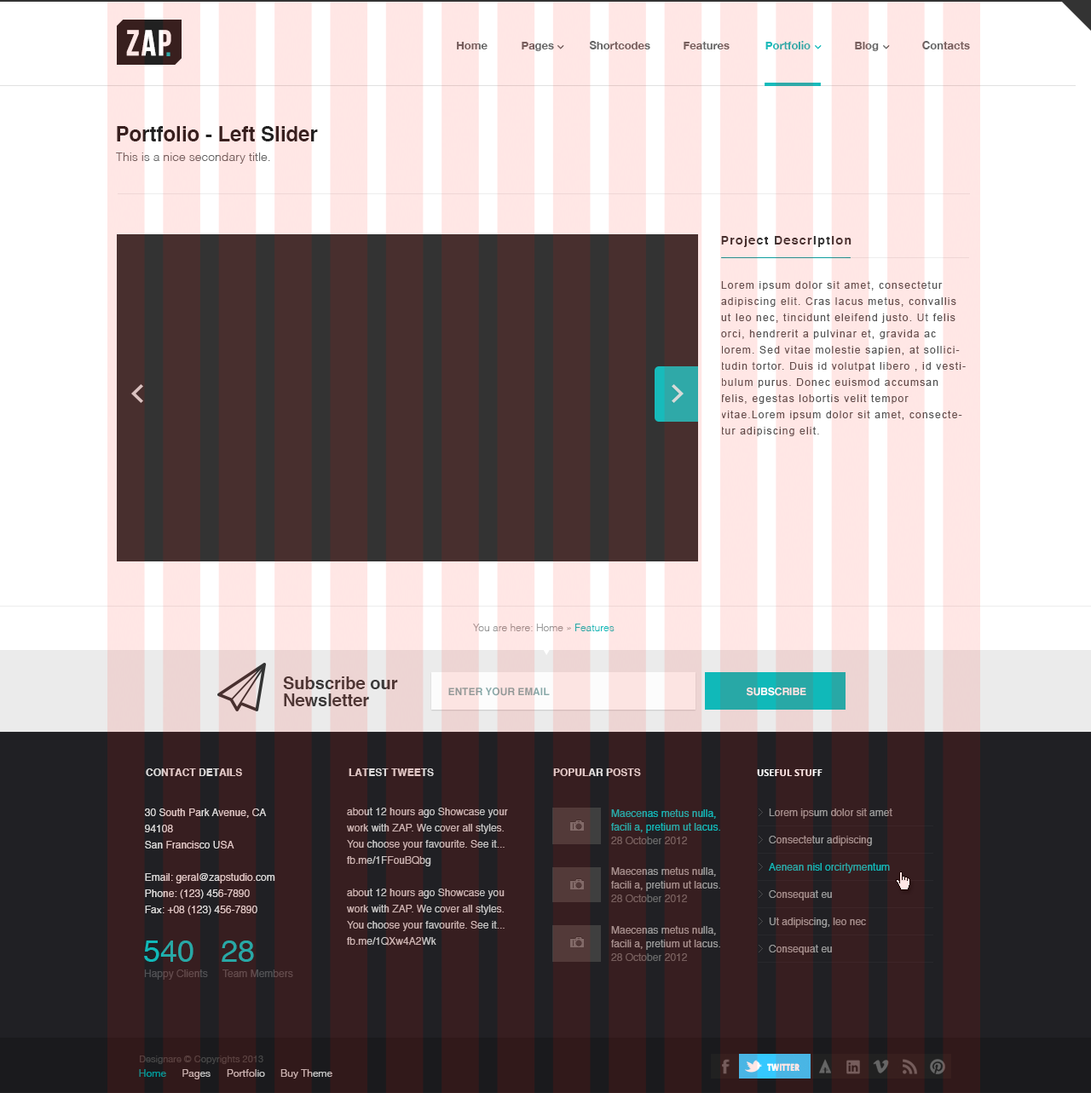
<style>
.page{position:relative;width:1091px;height:1093px}
.page>*{position:absolute;margin:0}
.t1{font:35.8px "BebasNeue";letter-spacing:0.025em;font-weight:bold}
.t2{font:11.1px "HelveticaNeue-Bold";color:#666666}
.t3{font:11.1px "HelveticaNeue-Bold";color:#17bbbb}
.t4{font:35.8px "Helvetica";letter-spacing:0.025em;color:#2fa9a8}
.t5{font:20.5px "Helvetica-Bold";color:#212121}
.t6{font:11.9px "Helvetica-Light";color:#666666}
.t7{font:11.9px "Helvetica-Bold";letter-spacing:0.1em;color:#333333}
.t8{font:10.2px/16.2px "ArialMT";letter-spacing:0.1em;color:#545454}
.t9{font:10.2px "Helvetica-Light";color:#999999}
.t10{font:10.2px "Helvetica-Light";color:#10b9b9}
.t11{font:17px/17px "Helvetica-Bold";color:#3b3a3a}
.t12{font:10.2px "Helvetica-Bold";color:#86a8a8;text-transform:uppercase}
.t13{font:10.2px "Helvetica-Bold";text-transform:uppercase}
.t14{font:10.2px "Helvetica-Bold";color:#dedcdc;text-transform:uppercase}
.t15{font:9.4px "OpenSans-Bold";color:#ffefee;text-transform:uppercase}
.t16{font:10.2px/16.2px "Helvetica";color:#dedcdc}
.t17{font:10.2px/16.2px "Helvetica";color:#c6c5c5}
.t18{font:10.2px/13.6px "Helvetica";color:#10b9b9}
.t19{font:10.2px/13.6px "Helvetica";color:#696969}
.t20{font:10.2px/27.3px "Helvetica";color:#9b9b9b}
.t21{font:10.2px/27.3px "Helvetica";color:#10b9b9}
.t22{font:10.2px/13.6px "Helvetica";color:#9b9b9b}
.t23{font:30.7px "Helvetica";color:#10b9b9}
.t24{font:10.2px "Helvetica";color:#525255}
.t25{font:9.4px "HelveticaNeue";color:#464646}
.t26{font:10.2px "HelveticaNeue";color:#009999}
.t27{font:10.2px "HelveticaNeue";color:#c1c1c1}
</style>
<div class="page">
<p class="t1" style="left:126px;top:30px;width:45px;height:26px">ZAP</p>
<p class="t2" style="left:457px;top:42px;width:30px;height:7px">Home</p>
<p class="t2" style="left:521px;top:42px;width:33px;height:9px">Pages</p>
<p class="t2" style="left:589px;top:41px;width:61px;height:8px">Shortcodes</p>
<p class="t2" style="left:683px;top:42px;width:46px;height:7px">Features</p>
<p class="t3" style="left:765px;top:41px;width:45px;height:8px">Portfolio</p>
<p class="t2" style="left:855px;top:42px;width:24px;height:9px">Blog</p>
<p class="t2" style="left:922px;top:41px;width:48px;height:8px">Contacts</p>
<p class="t4" style="left:166px;top:52px;width:4px;height:4px">.</p>
<p class="t5" style="left:117px;top:126px;width:201px;height:15px">Portfolio - Left Slider</p>
<p class="t6" style="left:116px;top:153px;width:154px;height:11px">This is a nice secondary title.</p>
<p class="t7" style="left:721px;top:236px;width:130px;height:11px">Project Description</p>
<p class="t8" style="left:721px;top:281px;width:244px;height:155px">Lorem ipsum dolor sit amet, consectetur adipiscing elit. Cras lacus metus, convallis ut leo nec, tincidunt eleifend justo. Ut felis orci, hendrerit a pulvinar et, gravida ac lorem. Sed vitae molestie sapien, at sollicitudin tortor. Duis id volutpat libero , id vestibulum purus. Donec euismod accumsan felis, egestas lobortis velit tempor vitae.Lorem ipsum dolor sit amet, consectetur adipiscing elit.</p>
<p class="t9" style="left:473px;top:624px;width:141px;height:7px">You are here: Home » <span class="t10">Features</span></p>
<p class="t11" style="left:283px;top:677px;width:115px;height:29px">Subscribe our <br>Newsletter</p>
<p class="t12" style="left:448px;top:688px;width:102px;height:8px">enter your email</p>
<p class="t13" style="left:746px;top:688px;width:60px;height:8px">SUBSCRIBE</p>
<p class="t14" style="left:146px;top:769px;width:96px;height:7px">CONTACT DETAILS</p>
<p class="t14" style="left:349px;top:769px;width:85px;height:7px">LATEST TWEETS</p>
<p class="t14" style="left:553px;top:769px;width:88px;height:7px">POPULAR POSTS</p>
<p class="t15" style="left:757px;top:769px;width:65px;height:7px">Useful stuff</p>
<p class="t16" style="left:145px;top:809px;width:130px;height:106px">30 South Park Avenue, CA 94108<br>San Francisco USA<br><br>Email: geral@zapstudio.com<br>Phone: (123) 456-7890<br>Fax: +08 (123) 456-7890</p>
<p class="t17" style="left:347px;top:808px;width:161px;height:138px">about 12 hours ago Showcase your work with ZAP. We cover all styles. You choose your favourite. See it... fb.me/1FFouBQbg<br><br>about 12 hours ago Showcase you work with ZAP. We cover all styles. You choose your favourite. See it... fb.me/1QXw4A2Wk</p>
<p class="t18" style="left:611px;top:810px;width:109px;height:34px">Maecenas metus nulla, facili a, pretium ut lacus.<br><span class="t19">28 October 2012</span></p>
<p class="t20" style="left:769px;top:809px;width:123px;height:146px">Lorem ipsum dolor sit amet<br>Consectetur adipiscing<br><span class="t21">Aenean nisl orcirtymentum <br></span>Consequat eu<br>Ut adipiscing, leo nec<br>Consequat eu</p>
<p class="t22" style="left:611px;top:867px;width:109px;height:35px">Maecenas metus nulla, facili a, pretium ut lacus.<br><span class="t19">28 October 2012</span></p>
<p class="t22" style="left:611px;top:926px;width:109px;height:35px">Maecenas metus nulla, facili a, pretium ut lacus.<br><span class="t19">28 October 2012</span></p>
<p class="t23" style="left:144px;top:941px;width:49px;height:21px">540</p>
<p class="t23" style="left:222px;top:941px;width:32px;height:21px">28</p>
<p class="t24" style="left:144px;top:970px;width:64px;height:10px">Happy Clients</p>
<p class="t24" style="left:222px;top:970px;width:71px;height:7px">Team Members</p>
<p class="t25" style="left:140px;top:1056px;width:123px;height:8px">Designare © Copyrights 2013</p>
<p class="t26" style="left:139px;top:1069px;width:27px;height:8px">Home</p>
<p class="t27" style="left:182px;top:1069px;width:28px;height:11px">Pages</p>
<p class="t27" style="left:227px;top:1069px;width:38px;height:8px">Portfolio</p>
<p class="t27" style="left:280px;top:1069px;width:52px;height:10px">Buy Theme</p>
</div>
